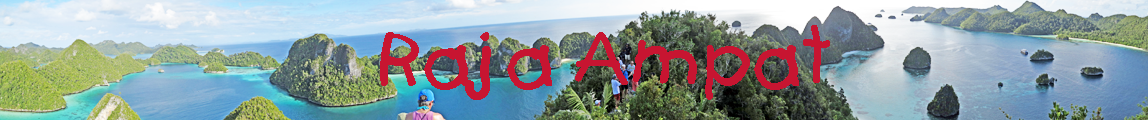
<style>
.page{position:relative;width:1148px;height:120px}
.page>*{position:absolute;margin:0}
.t1{font:74.7px "KidsPlain";color:#c71531}
</style>
<div class="page">
<p class="t1" style="left:380px;top:25px;width:450px;height:75px">Raja Ampat</p>
</div>
